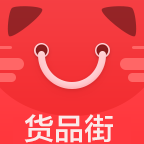
<style>
.page{position:relative;width:144px;height:144px}
.page>*{position:absolute;margin:0}
.t1{font:30px "FZLTZHK--GBK1-0";color:#faeaea}
</style>
<div class="page">
<p class="t1" style="left:24px;top:114px;width:89px;height:29px">货品街</p>
</div>
